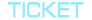
<style>
.page{position:relative;width:92px;height:20px;background:#ffffff}
.page>*{position:absolute;margin:0}
.t1{font:23px "MicrogrammaD-MediExte";letter-spacing:0.075em;color:#98e7fe;font-weight:bold;scale:0.7 1}
</style>
<div class="page">
<p class="t1" style="left:7px;top:2px;width:77px;height:16px">TICKET</p>
</div>
